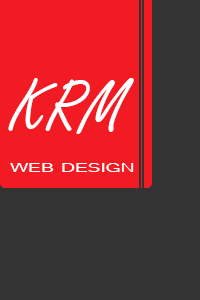
<style>
.page{position:relative;width:200px;height:300px;background:#333333}
.page>*{position:absolute;margin:0}
.t1{font:77.3px "FreestyleScript-Regular";letter-spacing:-0.01em;color:#ffffff;text-transform:uppercase;scale:1.04 1}
.t2{font:17.2px "Tunga";letter-spacing:-0.005em;color:#ffffff;text-transform:uppercase;scale:1.43 1}
</style>
<div class="page">
<p class="t1" style="left:8px;top:78px;width:126px;height:56px">KRM</p>
<p class="t2" style="left:10px;top:163px;width:124px;height:9px">Web Design</p>
</div>
